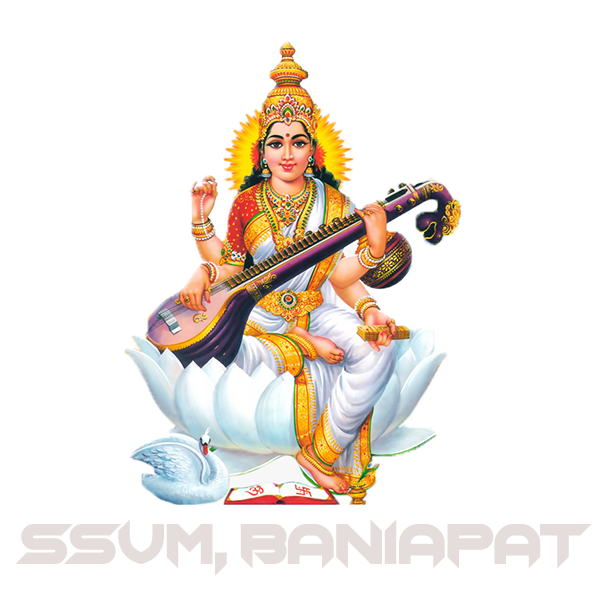
<style>
.page{position:relative;width:600px;height:600px;background:#ffffff}
.page>*{position:absolute;margin:0}
.t1{font:58.4px "Chopsic";color:#e5dcdc}
</style>
<div class="page">
<p class="t1" style="left:15px;top:519px;width:577px;height:57px">SSVM, BANIAPAT</p>
</div>
